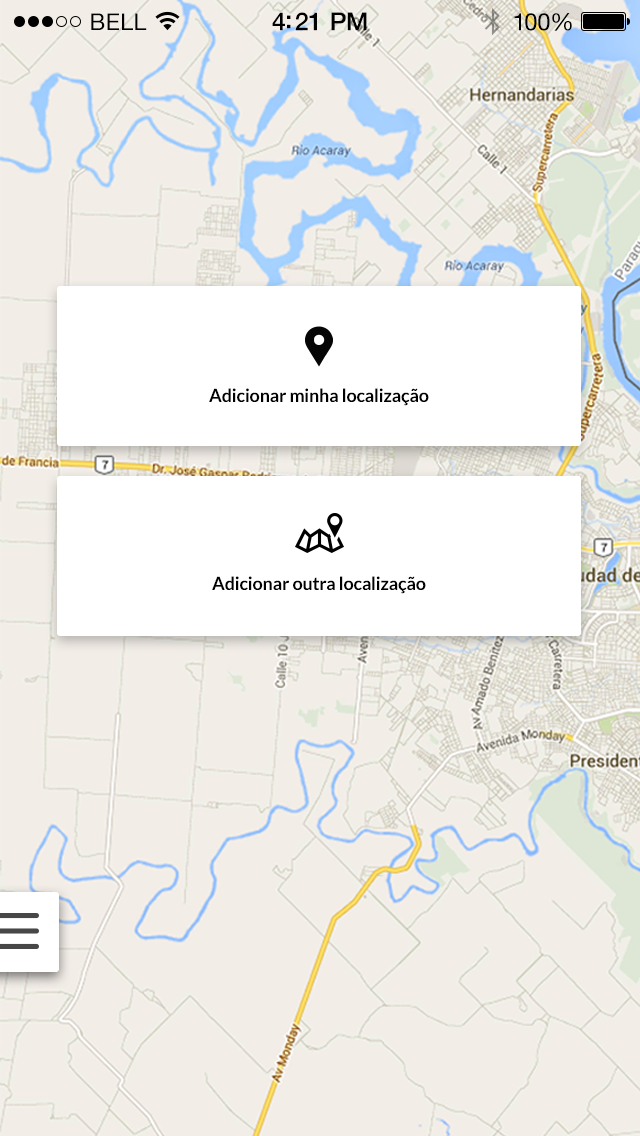
<style>
.page{position:relative;width:640px;height:1136px;background:#f2ede7}
.page>*{position:absolute;margin:0}
.t1{font:23px "HelveticaNeue";letter-spacing:0.02em;color:#000000}
.t2{font:25px "HelveticaNeue-Medium";letter-spacing:-0.02em;color:#000000}
.t3{font:24px "HelveticaNeue";letter-spacing:-0.02em;color:#010101}
.t4{font:18px "Lato-Bold";letter-spacing:-0.01em;color:#000000}
</style>
<div class="page">
<p class="t1" style="left:91px;top:13px;width:56px;height:17px">BELL</p>
<p class="t2" style="left:272px;top:12px;width:95px;height:19px">4:21 PM</p>
<p class="t3" style="left:514px;top:13px;width:58px;height:18px">100%</p>
<p class="t4" style="left:209px;top:388px;width:220px;height:18px">Adicionar minha localização</p>
<p class="t4" style="left:212px;top:576px;width:214px;height:18px">Adicionar outra localização</p>
</div>
